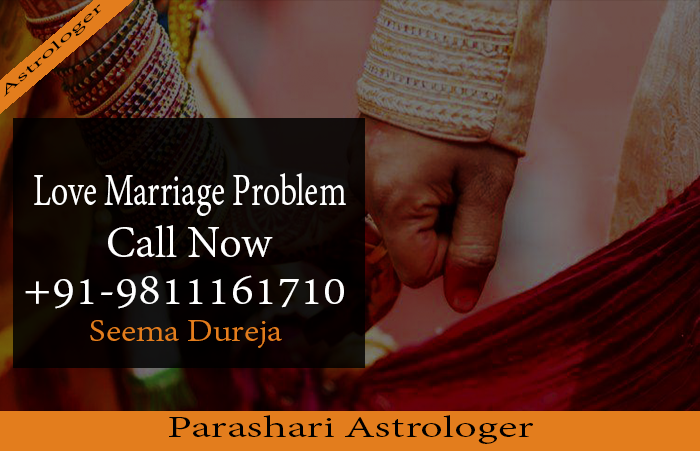
<style>
.page{position:relative;width:700px;height:451px}
.page>*{position:absolute;margin:0}
.t1{font:48px "AdobeDevanagari-Regular";color:#ffffff;scale:0.74 1}
.t2{font:48px "AdobeDevanagari-Regular";color:#ffffff}
.t3{font:48px "AdobeDevanagari-Regular";color:#ffffff;scale:1.07 1}
.t4{font:33.4px "AdobeDevanagari-Regular";color:#e37d1d;scale:1.12 1}
.t5{font:32.4px "AdobeDevanagari-Regular";color:#000000;scale:1.48 1}
</style>
<div class="page">
<p class="t1" style="left:34px;top:173px;width:312px;height:43px">Love Marriage Problem</p>
<p class="t2" style="left:108px;top:225px;width:165px;height:32px">Call Now</p>
<p class="t3" style="left:25px;top:275px;width:319px;height:34px">+91-9811161710</p>
<p class="t4" style="left:90px;top:320px;width:192px;height:28px">Seema Dureja</p>
<p class="t5" style="left:169px;top:415px;width:364px;height:29px">Parashari Astrologer</p>
</div>
